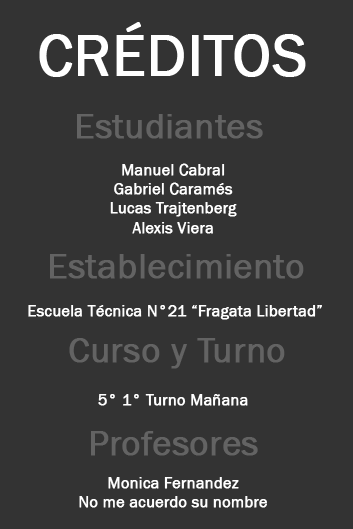
<style>
.page{position:relative;width:353px;height:529px;background:#333333}
.page>*{position:absolute;margin:0}
.t1{font:60px "FranklinGothic-Book";color:#ffffff;font-weight:bold}
.t2{font:36px "FranklinGothic-Book";color:#636363;font-weight:bold}
.t3{font:16px "FranklinGothic-Book";color:#ffffff;font-weight:bold}
</style>
<div class="page">
<p class="t1" style="left:39px;top:22px;width:267px;height:55px">CRÉDITOS</p>
<p class="t2" style="left:77px;top:114px;width:186px;height:25px">Estudiantes</p>
<p class="t3" style="left:110px;top:163px;width:127px;height:71px;text-align:center">Manuel Cabral<br>Gabriel Caramés<br>Lucas Trajtenberg<br>Alexis Viera</p>
<p class="t2" style="left:50px;top:254px;width:254px;height:25px">Establecimiento</p>
<p class="t3" style="left:28px;top:305px;width:294px;height:15px">Escuela Técnica N°21 “Fragata Libertad”</p>
<p class="t2" style="left:69px;top:338px;width:216px;height:31px">Curso y Turno</p>
<p class="t3" style="left:98px;top:394px;width:150px;height:12px">5° 1° Turno Mañana</p>
<p class="t2" style="left:91px;top:431px;width:167px;height:25px">Profesores</p>
<p class="t3" style="left:79px;top:477px;width:188px;height:31px;text-align:center">Monica Fernandez<br>No me acuerdo su nombre</p>
</div>
